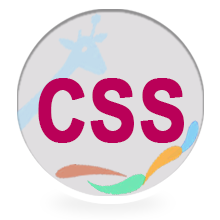
<style>
.page{position:relative;width:220px;height:220px;background:#ffffff}
.page>*{position:absolute;margin:0}
.t1{font:86.3px "ArialNarrow-Bold";color:#ba0058;font-weight:bold}
</style>
<div class="page">
<p class="t1" style="left:38px;top:78px;width:146px;height:65px">CSS</p>
</div>
